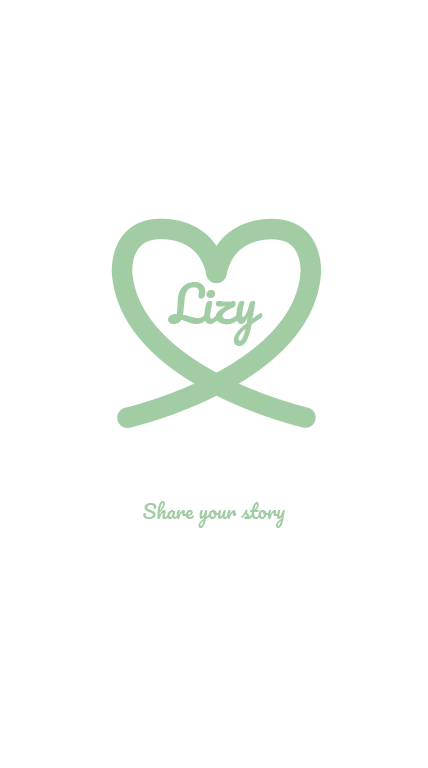
<style>
.page{position:relative;width:428px;height:768px;background:#ffffff}
.page>*{position:absolute;margin:0}
.t1{font:20px "Pacifico-Regular";color:#a2cda4}
</style>
<div class="page">
<p class="t1" style="left:143px;top:501px;width:142px;height:27px">Share your story</p>
</div>
